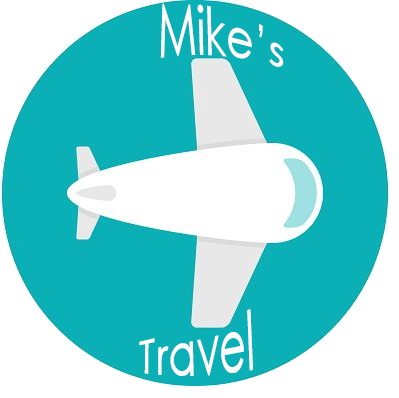
<style>
.page{position:relative;width:399px;height:398px;background:#0bb0b6}
.page>*{position:absolute;margin:0}
.t1{font:40px "CenturyGothic";color:#ffffff}
</style>
<div class="page">
<p class="t1" style="left:160px;top:3px;width:124px;height:64px">Mike’s</p>
<p class="t1" style="left:139px;top:309px;width:114px;height:67px">Travel</p>
</div>
